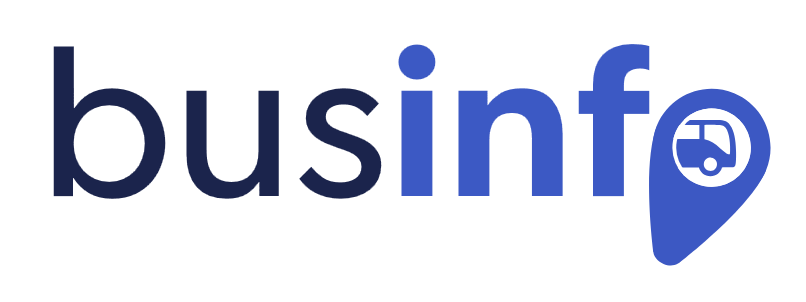
<style>
.page{position:relative;width:806px;height:302px;background:#ffffff}
.page>*{position:absolute;margin:0}
.t1{font:213px "FuturaTodayScreen-Normal";color:#1b244c}
.t2{font:213px "FuturaTodayScreen-DemiBold";color:#3c59c4}
</style>
<div class="page">
<p class="t1" style="left:53px;top:43px;width:597px;height:156px">bus<span class="t2">inf</span></p>
</div>
